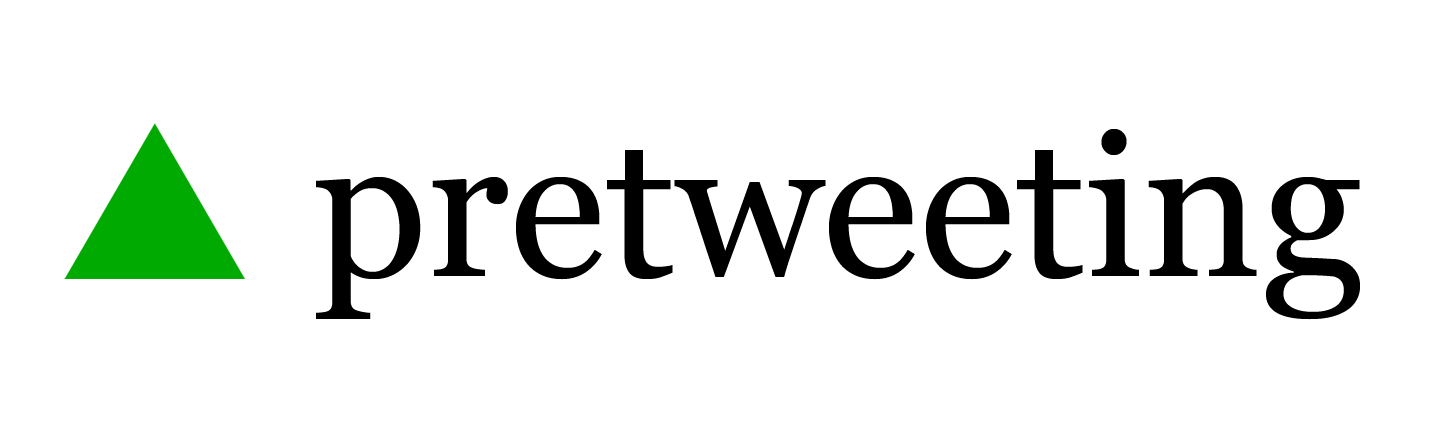
<style>
.page{position:relative;width:1440px;height:439px;background:#ffffff}
.page>*{position:absolute;margin:0}
.t1{font:200px "Georgia";color:#000000}
</style>
<div class="page">
<p class="t1" style="left:316px;top:129px;width:1044px;height:191px">pretweeting</p>
</div>
